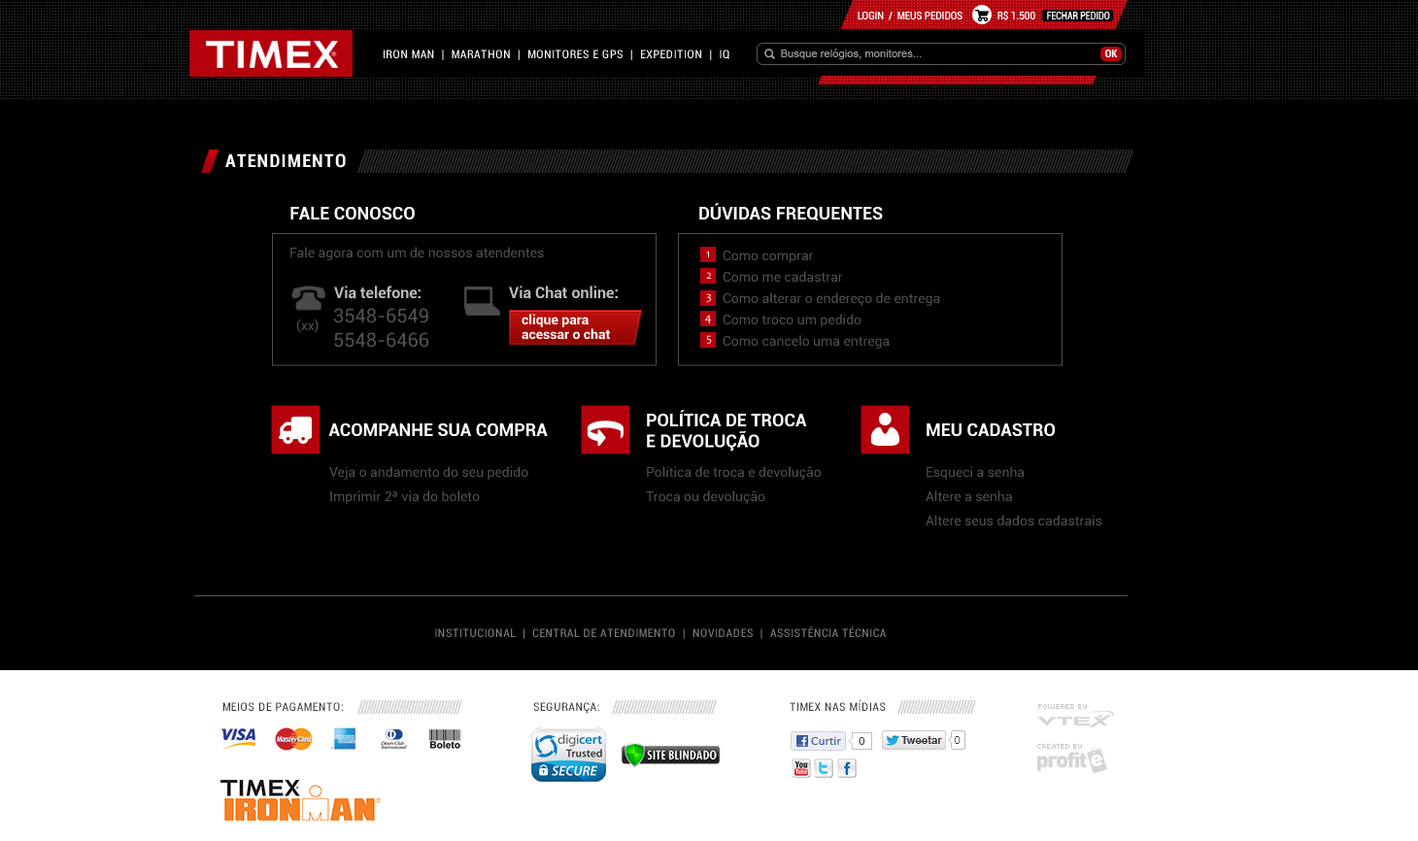
<style>
.page{position:relative;width:1418px;height:841px;background:#000000}
.page>*{position:absolute;margin:0}
.t1{font:18.1px "Roboto-BoldCondensed";letter-spacing:0.05em;color:#ffffff;text-transform:uppercase}
.t2{font:17.5px "Roboto-Bold";color:#feffff;text-transform:uppercase}
.t3{font:13.6px "Roboto-Regular";color:#505050}
.t4{font:11.7px "Candara";color:#ffffff}
.t5{font:13.6px/21.4px "Roboto-Regular";color:#505050}
.t6{font:15.5px "Roboto-Bold";color:#bbbbbb}
.t7{font:19.4px/24.3px "Roboto-Regular";color:#505050}
.t8{font:13.6px/14.6px "Roboto-Bold";color:#ffffff}
.t9{font:11.7px "Candara"}
.t10{font:13.6px/24.3px "Roboto-Regular";color:#505050}
</style>
<div class="page">
<p class="t1" style="left:225px;top:153px;width:121px;height:15px">ATENDIMENTO</p>
<p class="t2" style="left:290px;top:207px;width:125px;height:12px">Fale Conosco</p>
<p class="t2" style="left:699px;top:203px;width:184px;height:18px">DÚVIDAS FREQUENTES</p>
<p class="t3" style="left:290px;top:247px;width:254px;height:13px">Fale agora com um de nossos atendentes</p>
<p class="t4" style="left:706px;top:251px;width:3px;height:6px">1</p>
<p class="t5" style="left:723px;top:251px;width:217px;height:98px">Como comprar<br>Como me cadastrar<br>Como alterar o endereço de entrega<br>Como troco um pedido<br>Como cancelo uma entrega</p>
<p class="t4" style="left:706px;top:272px;width:6px;height:7px">2</p>
<p class="t6" style="left:334px;top:286px;width:87px;height:13px">Via telefone:</p>
<p class="t6" style="left:509px;top:286px;width:109px;height:13px">Via Chat online:</p>
<p class="t4" style="left:706px;top:293px;width:5px;height:10px">3</p>
<p class="t7" style="left:334px;top:308px;width:95px;height:40px">3548-6549<br>5548-6466</p>
<p class="t8" style="left:522px;top:314px;width:88px;height:26px">clique para<br>acessar o chat</p>
<p class="t9" style="left:705px;top:315px;width:6px;height:8px">4</p>
<p class="t3" style="left:297px;top:319px;width:22px;height:14px">(xx)</p>
<p class="t9" style="left:706px;top:335px;width:6px;height:10px">5</p>
<p class="t2" style="left:647px;top:410px;width:160px;height:42px">política de troca<br>e devolução</p>
<p class="t2" style="left:328px;top:423px;width:220px;height:13px">ACOMPANHE SUA COMPRA</p>
<p class="t2" style="left:926px;top:423px;width:129px;height:13px">meu cadastro</p>
<p class="t10" style="left:329px;top:466px;width:199px;height:38px">Veja o andamento do seu pedido<br>Imprimir 2ª via do boleto</p>
<p class="t10" style="left:646px;top:466px;width:175px;height:38px">Política de troca e devolução<br>Troca ou devolução</p>
<p class="t10" style="left:925px;top:466px;width:176px;height:60px">Esqueci a senha<br>Altere a senha<br>Altere seus dados cadastrais</p>
</div>
